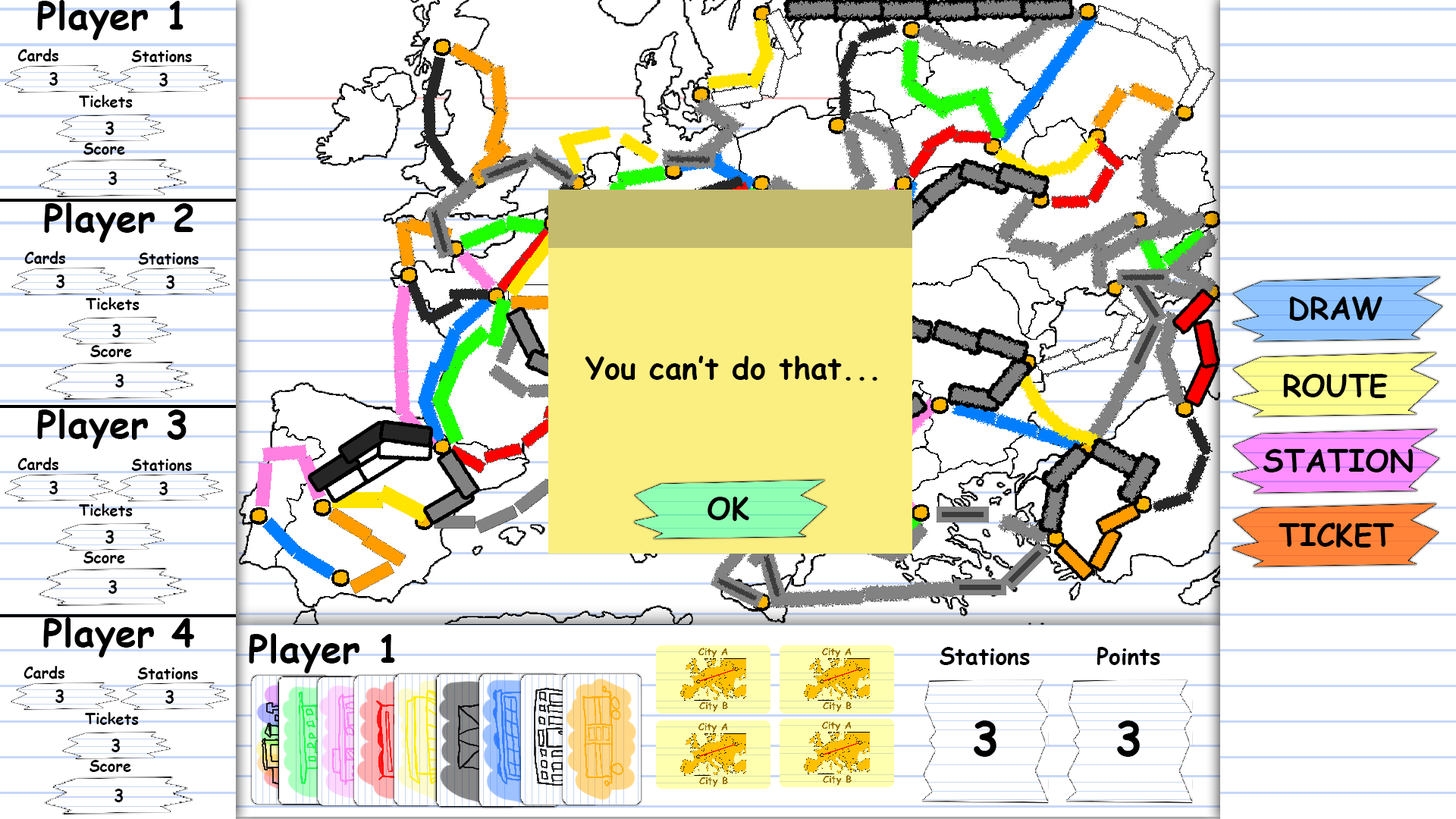
<style>
.page{position:relative;width:1456px;height:819px;background:#ffffff}
.page>*{position:absolute;margin:0}
.t1{font:37.9px "ComicSansMS-Bold";color:#000000}
.t2{font:15.2px "ComicSansMS-Bold";color:#000000}
.t3{font:16.7px "ComicSansMS-Bold";color:#000000}
.t4{font:22.8px "ComicSansMS-Bold";color:#000000}
.t5{font:45.5px "ComicSansMS-Bold";color:#000000}
</style>
<div class="page">
<p class="t1" style="left:37px;top:0px;width:147px;height:40px">Player 1</p>
<p class="t2" style="left:17px;top:49px;width:41px;height:12px">Cards</p>
<p class="t2" style="left:131px;top:50px;width:61px;height:12px">Stations</p>
<p class="t3" style="left:49px;top:72px;width:9px;height:14px">3</p>
<p class="t3" style="left:159px;top:73px;width:9px;height:13px">3</p>
<p class="t2" style="left:79px;top:95px;width:54px;height:13px">Tickets</p>
<p class="t3" style="left:105px;top:121px;width:9px;height:14px">3</p>
<p class="t2" style="left:83px;top:143px;width:42px;height:12px">Score</p>
<p class="t3" style="left:108px;top:171px;width:9px;height:14px">3</p>
<p class="t1" style="left:44px;top:202px;width:149px;height:41px">Player 2</p>
<p class="t2" style="left:24px;top:251px;width:41px;height:13px">Cards</p>
<p class="t2" style="left:138px;top:253px;width:61px;height:12px">Stations</p>
<p class="t3" style="left:56px;top:275px;width:8px;height:13px">3</p>
<p class="t3" style="left:166px;top:275px;width:8px;height:14px">3</p>
<p class="t2" style="left:86px;top:297px;width:54px;height:13px">Tickets</p>
<p class="t3" style="left:112px;top:324px;width:9px;height:13px">3</p>
<p class="t2" style="left:90px;top:345px;width:42px;height:12px">Score</p>
<p class="t3" style="left:115px;top:374px;width:9px;height:14px">3</p>
<p class="t1" style="left:37px;top:409px;width:150px;height:40px">Player 3</p>
<p class="t2" style="left:17px;top:457px;width:41px;height:13px">Cards</p>
<p class="t2" style="left:131px;top:459px;width:61px;height:12px">Stations</p>
<p class="t3" style="left:49px;top:481px;width:9px;height:13px">3</p>
<p class="t3" style="left:159px;top:482px;width:9px;height:13px">3</p>
<p class="t2" style="left:79px;top:504px;width:54px;height:12px">Tickets</p>
<p class="t3" style="left:105px;top:530px;width:9px;height:14px">3</p>
<p class="t2" style="left:83px;top:551px;width:42px;height:12px">Score</p>
<p class="t3" style="left:108px;top:580px;width:9px;height:14px">3</p>
<p class="t1" style="left:43px;top:617px;width:151px;height:40px">Player 4</p>
<p class="t1" style="left:249px;top:633px;width:146px;height:40px">Player 1</p>
<p class="t4" style="left:940px;top:647px;width:90px;height:18px">Stations</p>
<p class="t4" style="left:1097px;top:647px;width:63px;height:18px">Points</p>
<p class="t2" style="left:24px;top:666px;width:40px;height:13px">Cards</p>
<p class="t2" style="left:137px;top:667px;width:61px;height:12px">Stations</p>
<p class="t3" style="left:55px;top:689px;width:9px;height:14px">3</p>
<p class="t3" style="left:165px;top:690px;width:9px;height:14px">3</p>
<p class="t2" style="left:85px;top:712px;width:54px;height:13px">Tickets</p>
<p class="t5" style="left:974px;top:720px;width:22px;height:37px">3</p>
<p class="t5" style="left:1117px;top:720px;width:23px;height:37px">3</p>
<p class="t3" style="left:111px;top:739px;width:9px;height:13px">3</p>
<p class="t2" style="left:89px;top:760px;width:42px;height:12px">Score</p>
<p class="t3" style="left:115px;top:789px;width:8px;height:13px">3</p>
</div>
